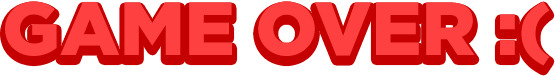
<style>
.page{position:relative;width:555px;height:76px;background:#ff4040}
.page>*{position:absolute;margin:0}
.t1{font:75px "GothamPro-Black";color:#ff4040}
</style>
<div class="page">
<p class="t1" style="left:5px;top:1px;width:545px;height:65px">GAME OVER :(</p>
</div>
